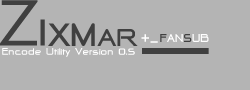
<style>
.page{position:relative;width:250px;height:90px;background:#b4b4b4}
.page>*{position:absolute;margin:0}
.t1{font:92px "ThaiSansLite";color:#404040;scale:1.11 1}
.t2{font:46px "-@-D-RCW2550v.2.00-";color:#404040;scale:1.11 1}
.t3{font:40px "-@-D-RCW2550v.2.00-";color:#404040;scale:1.11 1}
.t4{font:30px "-@-D-RCW2550v.2.00-";color:#404040;scale:1.11 1}
.t5{font:18px "-@-D-RCW2550v.2.00-";color:#ffffff}
.t6{font:12px "-@-D-RCW2550v.2.00-";color:#ffffff;scale:1.11 1}
</style>
<div class="page">
<p class="t1" style="left:0px;top:0px;width:45px;height:46px">Z<span class="t2">I</span></p>
<p class="t3" style="left:48px;top:23px;width:90px;height:23px">XM<span class="t4">AR</span></p>
<p class="t5" style="left:141px;top:34px;width:17px;height:9px">+_</p>
<p class="t6" style="left:2px;top:48px;width:133px;height:9px">Encode Utility Version 0.5</p>
</div>
